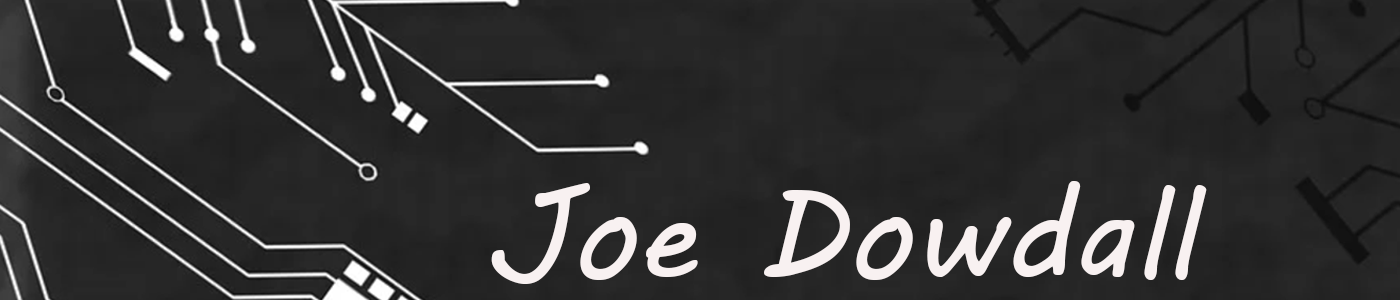
<style>
.page{position:relative;width:1400px;height:300px}
.page>*{position:absolute;margin:0}
.t1{font:125px "MVBoli";color:#f8f1f1}
</style>
<div class="page">
<p class="t1" style="left:491px;top:181px;width:716px;height:103px">Joe Dowdall</p>
</div>
